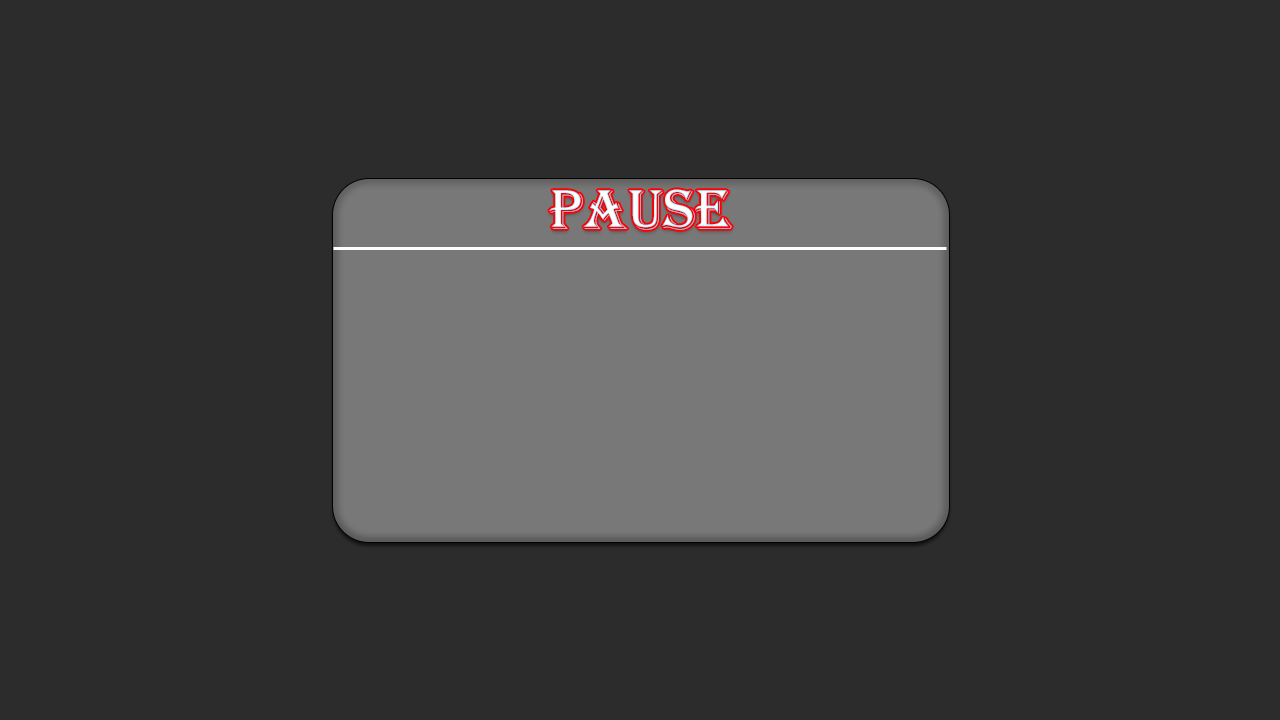
<style>
.page{position:relative;width:1280px;height:720px;background:#2c2c2c}
.page>*{position:absolute;margin:0}
.t1{font:58.3px "Algerian";color:#ffffff}
</style>
<div class="page">
<p class="t1" style="left:549px;top:189px;width:183px;height:41px">PAUSE</p>
</div>
